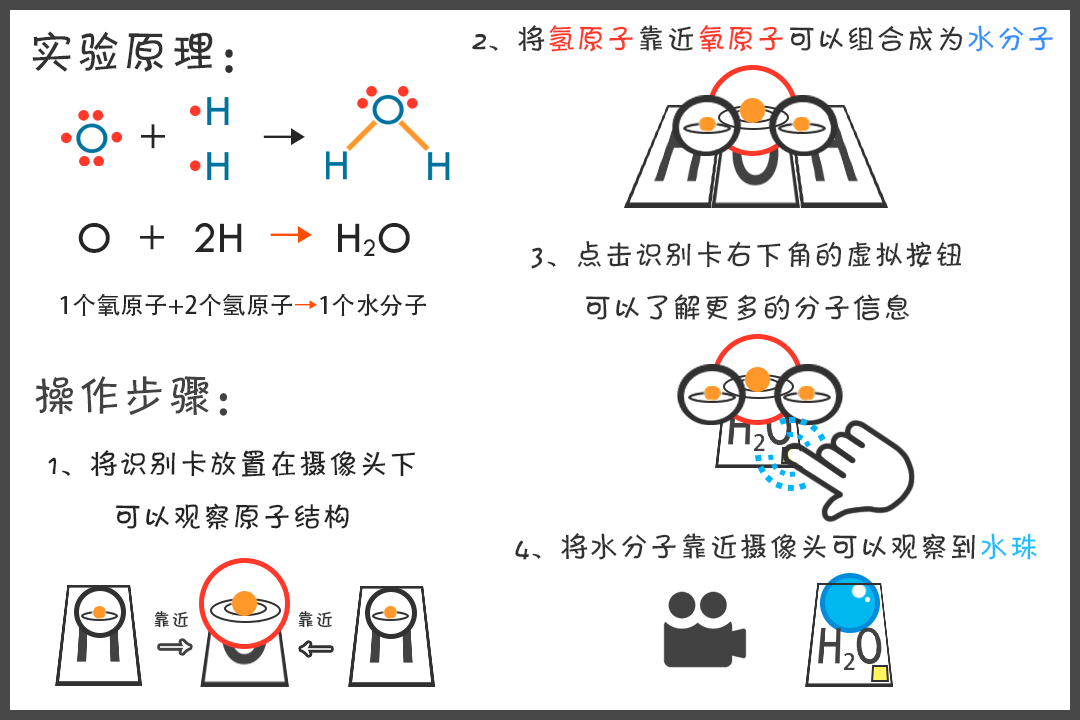
<style>
.page{position:relative;width:1080px;height:720px;background:#ffffff}
.page>*{position:absolute;margin:0}
.t1{font:30px "Jkaton";color:#313131}
.t2{font:30px "Jkaton";color:#ff3829}
.t3{font:30px "Jkaton";color:#3690ff}
.t4{font:81px "Jkaton";color:#313131}
.t5{font:45.1px "TwCenMT-Regular";color:#252525}
.t6{font:45.1px "AdobeHeitiStd-Regular";color:#252525}
.t7{font:45.1px "AdobeHeitiStd-Regular";color:#ff4e00}
.t8{font:24px "AdobeHeitiStd-Regular";color:#252525}
.t9{font:24px "AdobeHeitiStd-Regular";color:#ff4e00}
.t10{font:45px "Jkaton";color:#424242}
.t11{font:30px "Jkaton";color:#232323}
.t12{font:30px "Jkaton";color:#21beff}
.t13{font:32px "Jkaton";color:#313131}
.t14{font:50px "Jkaton";color:#fffefe;font-weight:bold}
</style>
<div class="page">
<p class="t1" style="left:472px;top:25px;width:581px;height:27px">2、将<span class="t2">氢原子</span>靠近<span class="t2">氧原子</span>可以组合成为<span class="t3">水分子</span></p>
<p class="t4" style="left:32px;top:31px;width:201px;height:42px">实验原理：</p>
<p class="t5" style="left:141px;top:124px;width:24px;height:25px">+</p>
<p class="t6" style="left:263px;top:128px;width:42px;height:18px">→</p>
<p class="t5" style="left:78px;top:223px;width:332px;height:33px">O  +  2H  <span class="t7">→  </span>H2O</p>
<p class="t1" style="left:531px;top:241px;width:431px;height:80px;text-align:center">3、点击识别卡右下角的虚拟按钮<br>可以了解更多的分子信息</p>
<p class="t8" style="left:60px;top:293px;width:366px;height:23px">1个氧原子+2个氢原子<span class="t9">→</span>1个水分子</p>
<p class="t10" style="left:35px;top:376px;width:192px;height:40px">操作步骤：</p>
<p class="t11" style="left:48px;top:450px;width:367px;height:80px;text-align:center">1、将识别卡放置在摄像头下<br>可以观察原子结构</p>
<p class="t1" style="left:515px;top:533px;width:522px;height:27px">4、将水分子靠近摄像头可以观察到<span class="t12">水珠</span></p>
<p class="t13" style="left:154px;top:611px;width:34px;height:17px">靠近</p>
<p class="t13" style="left:298px;top:611px;width:34px;height:17px">靠近</p>
<p class="t14" style="left:160px;top:641px;width:30px;height:12px">→</p>
<p class="t14" style="left:301px;top:643px;width:30px;height:12px">←</p>
</div>
